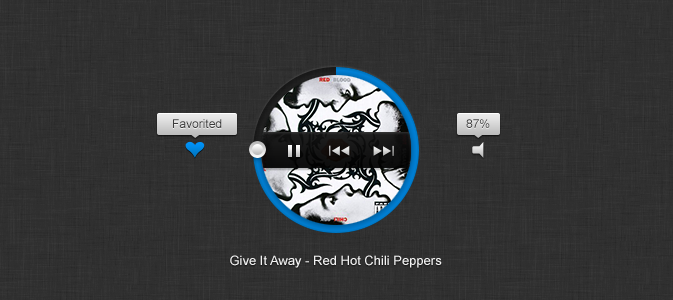
<style>
.page{position:relative;width:673px;height:300px;background:#2f2f2f}
.page>*{position:absolute;margin:0}
.t1{font:12px "ArialMT";color:#3b3b3b}
.t2{font:13px "ArialMT";color:#f2f2f2}
</style>
<div class="page">
<p class="t1" style="left:173px;top:119px;width:49px;height:9px">Favorited</p>
<p class="t1" style="left:466px;top:119px;width:24px;height:9px">87%</p>
<p class="t2" style="left:230px;top:255px;width:212px;height:13px">Give It Away - Red Hot Chili Peppers</p>
</div>
